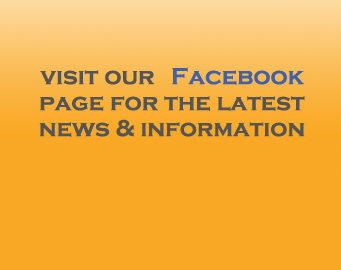
<style>
.page{position:relative;width:341px;height:270px;background:#f9a925}
.page>*{position:absolute;margin:0}
.t1{font:24px "CopperplateGothic-Bold";color:#555555}
.t2{font:24px "CopperplateGothic-Bold";color:#4162a9}
</style>
<div class="page">
<p class="t1" style="left:40px;top:70px;width:115px;height:15px">visit our</p>
<p class="t2" style="left:172px;top:67px;width:132px;height:18px">Facebook</p>
<p class="t1" style="left:40px;top:96px;width:265px;height:15px">page for the latest</p>
<p class="t1" style="left:39px;top:119px;width:266px;height:18px">news &amp; information</p>
</div>
